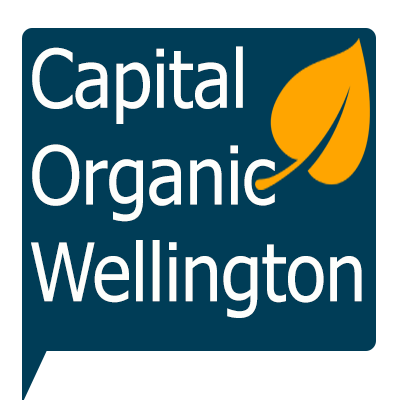
<style>
.page{position:relative;width:400px;height:400px;background:#003d57}
.page>*{position:absolute;margin:0}
.t1{font:80.7px "Tahoma";color:#fdfefc;scale:0.9 1}
</style>
<div class="page">
<p class="t1" style="left:31px;top:46px;width:331px;height:272px">Capital<br>Organic<br>Wellington</p>
</div>
